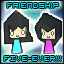
<style>
.page{position:relative;width:64px;height:64px}
.page>*{position:absolute;margin:0}
.t1{font:10px "VisitorTT1BRK";color:#00f6ff}
</style>
<div class="page">
<p class="t1" style="left:4px;top:3px;width:58px;height:58px;text-align:center">Friendship<br><br><br><br><br><br>FIVE-EVER!!!</p>
</div>
